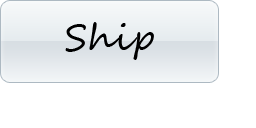
<style>
.page{position:relative;width:256px;height:128px;background:#ffffff}
.page>*{position:absolute;margin:0}
.t1{font:36px "SegoeScript";color:#000000}
</style>
<div class="page">
<p class="t1" style="left:65px;top:22px;width:89px;height:38px">Ship</p>
</div>
